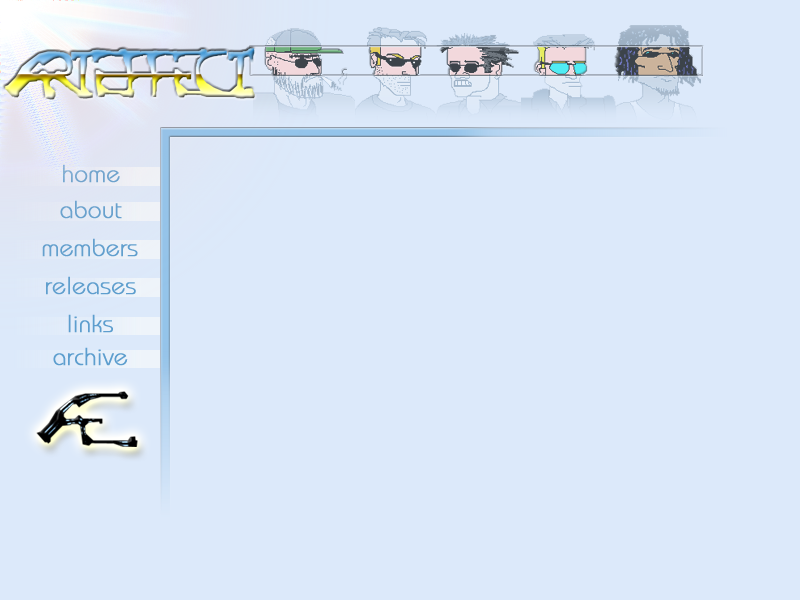
<style>
.page{position:relative;width:800px;height:600px;background:#dce9fa}
.page>*{position:absolute;margin:0}
.t1{font:24px "BauhausL";color:#72a4cd;font-weight:bold}
.t2{font:24px "BauhausL";color:#5d9ece;font-weight:bold}
</style>
<div class="page">
<p class="t1" style="left:63px;top:164px;width:57px;height:19px">home</p>
<p class="t2" style="left:60px;top:200px;width:62px;height:19px">about</p>
<p class="t2" style="left:42px;top:238px;width:96px;height:19px">members</p>
<p class="t2" style="left:46px;top:276px;width:90px;height:19px">releases</p>
<p class="t2" style="left:68px;top:314px;width:45px;height:19px">links</p>
<p class="t2" style="left:53px;top:347px;width:75px;height:19px">archive</p>
</div>
